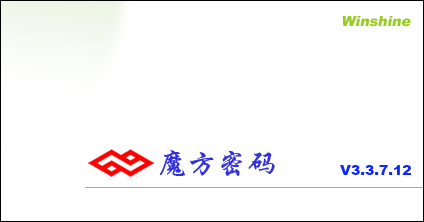
<style>
.page{position:relative;width:424px;height:222px;background:#ffffff}
.page>*{position:absolute;margin:0}
.t1{font:14px "Arial-Black";color:#97cd23;font-style:italic}
.t2{font:30px "STXingkai";color:#3131de}
.t3{font:14px "Arial-Black";color:#0d28f7}
</style>
<div class="page">
<p class="t1" style="left:342px;top:16px;width:69px;height:11px">Winshine</p>
<p class="t2" style="left:160px;top:150px;width:115px;height:26px">魔方密码</p>
<p class="t3" style="left:340px;top:165px;width:71px;height:10px">V3.3.7.12</p>
</div>
